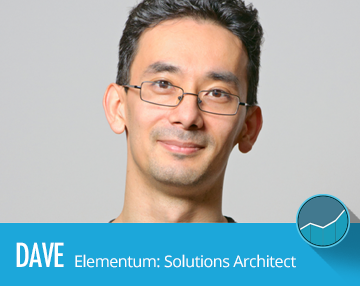
<style>
.page{position:relative;width:360px;height:286px}
.page>*{position:absolute;margin:0}
.t1{font:32px "Futura-CondensedMedium";letter-spacing:-0.01em;color:#ffffff}
.t2{font:16px "OpenSans";letter-spacing:-0.025em;color:#ffffff}
</style>
<div class="page">
<p class="t1" style="left:16px;top:242px;width:48px;height:25px">DAVE</p>
<p class="t2" style="left:75px;top:254px;width:221px;height:14px">Elementum: Solutions Architect</p>
</div>
